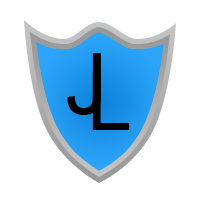
<style>
.page{position:relative;width:200px;height:200px;background:#ffffff}
.page>*{position:absolute;margin:0}
.t1{font:84.9px "ArialMT";color:#000000}
.t2{font:81px "ArialMT";color:#000000}
</style>
<div class="page">
<p class="t1" style="left:67px;top:53px;width:34px;height:62px">J</p>
<p class="t2" style="left:92px;top:72px;width:38px;height:58px">L</p>
</div>
